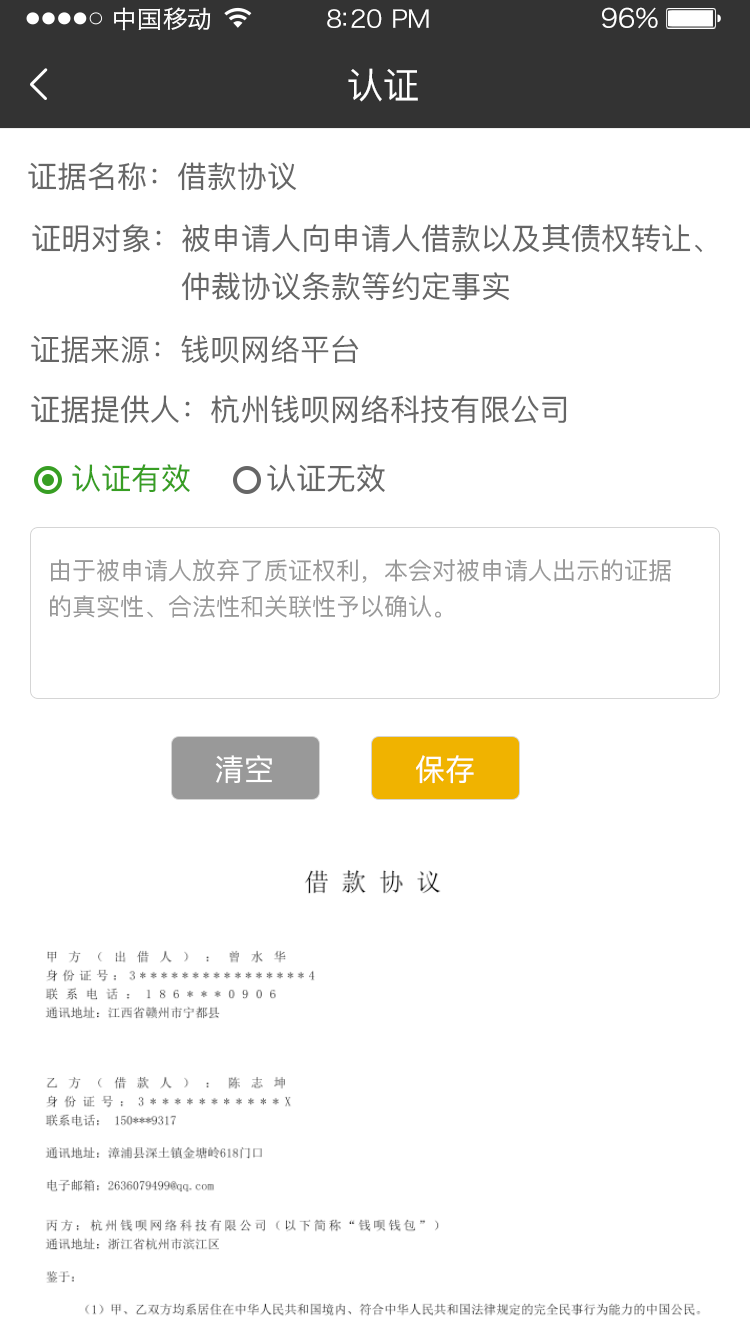
<style>
.page{position:relative;width:750px;height:1334px;background:#ffffff}
.page>*{position:absolute;margin:0}
.t1{font:24px "HiraginoSansGB-W3";letter-spacing:0.02em;color:#ffffff;scale:1.03 1}
.t2{font:24px "HiraginoSansGB-W3";letter-spacing:-0.02em;color:#ffffff;scale:1.03 1}
.t3{font:26.2px "HiraginoSansGB-W3";letter-spacing:-0.02em;color:#ffffff;scale:1.03 1}
.t4{font:36px "PingFangSC-Regular";letter-spacing:-0.02em;color:#ffffff}
.t5{font:30px "PingFangSC-Regular";color:#666666}
.t6{font:30px/48px "PingFangSC-Regular";color:#666666}
.t7{font:30px "PingFangSC-Regular";color:#379e23}
.t8{font:24px/36px "PingFangSC-Regular";color:#999999}
.t9{font:30px "PingFangSC-Regular";letter-spacing:-0.02em;color:#ffffff}
</style>
<div class="page">
<p class="t1" style="left:114px;top:7px;width:97px;height:24px">中国移动</p>
<p class="t2" style="left:327px;top:9px;width:102px;height:19px">8:20 PM</p>
<p class="t3" style="left:602px;top:7px;width:56px;height:22px">96%</p>
<p class="t4" style="left:348px;top:68px;width:70px;height:34px">认证</p>
<p class="t5" style="left:28px;top:162px;width:269px;height:29px">证据名称：借款协议</p>
<p class="t6" style="left:32px;top:224px;width:671px;height:77px">证明对象：被申请人向申请人借款以及其债权转让、<br>               仲裁协议条款等约定事实</p>
<p class="t5" style="left:31px;top:335px;width:328px;height:28px">证据来源：钱呗网络平台</p>
<p class="t5" style="left:31px;top:395px;width:536px;height:29px">证据提供人：杭州钱呗网络科技有限公司</p>
<p class="t7" style="left:72px;top:464px;width:118px;height:29px">认证有效</p>
<p class="t5" style="left:267px;top:464px;width:118px;height:28px">认证无效</p>
<p class="t8" style="left:50px;top:559px;width:621px;height:59px">由于被申请人放弃了质证权利，本会对被申请人出示的证据<br>的真实性、合法性和关联性予以确认。</p>
<p class="t9" style="left:215px;top:755px;width:57px;height:29px">清空</p>
<p class="t9" style="left:416px;top:755px;width:58px;height:29px">保存</p>
</div>
